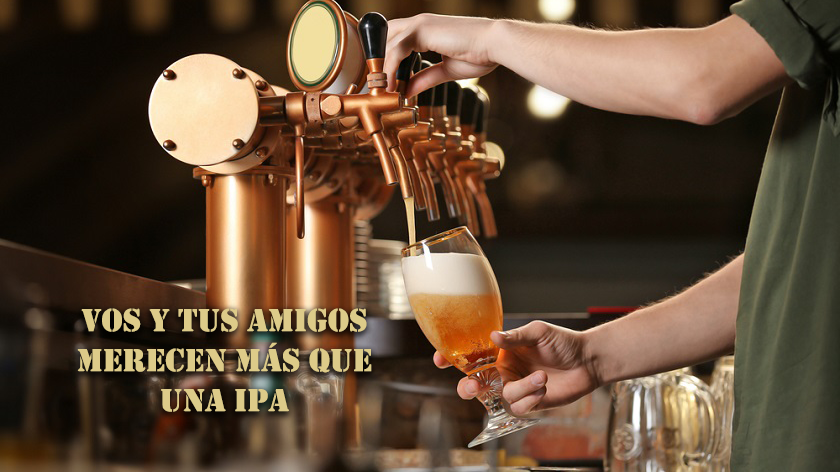
<style>
.page{position:relative;width:840px;height:472px}
.page>*{position:absolute;margin:0}
.t1{font:33.3px "Stencil";color:#ddcb89;text-transform:uppercase}
</style>
<div class="page">
<p class="t1" style="left:77px;top:308px;width:295px;height:104px;text-align:center">Vos y tus amigos merecen más que una IPA</p>
</div>
